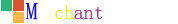
<style>
.page{position:relative;width:178px;height:24px;background:#ffffff}
.page>*{position:absolute;margin:0}
.t1{font:24px "SimSun";color:#100af3}
.t2{font:11px "SimSun";color:#ee1025}
.t3{font:20px "SimSun";color:#faec07}
.t4{font:20px "SimSun";color:#b52a7f}
</style>
<div class="page">
<p class="t1" style="left:25px;top:3px;width:13px;height:17px"><span class="t2"><br></span>M</p>
<p class="t3" style="left:55px;top:4px;width:19px;height:16px">ch</p>
<p class="t4" style="left:74px;top:7px;width:29px;height:13px">ant</p>
</div>
